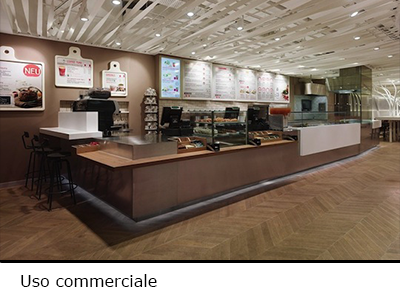
<style>
.page{position:relative;width:400px;height:300px}
.page>*{position:absolute;margin:0}
.t1{font:16px "Verdana";color:#000000}
</style>
<div class="page">
<p class="t1" style="left:21px;top:274px;width:136px;height:13px">Uso commerciale</p>
</div>
